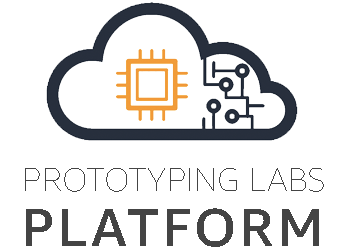
<style>
.page{position:relative;width:350px;height:250px;background:#ffffff}
.page>*{position:absolute;margin:0}
.t1{font:32.9px "AmazonEmber-Thin";color:#444444;scale:1.04 1}
.t2{font:52.6px "AmazonEmber-Medium";letter-spacing:0.06em;color:#444444;scale:1.04 1}
</style>
<div class="page">
<p class="t1" style="left:25px;top:168px;width:299px;height:24px">PROTOTYPING LABS</p>
<p class="t2" style="left:26px;top:208px;width:293px;height:39px">PLATFORM</p>
</div>
